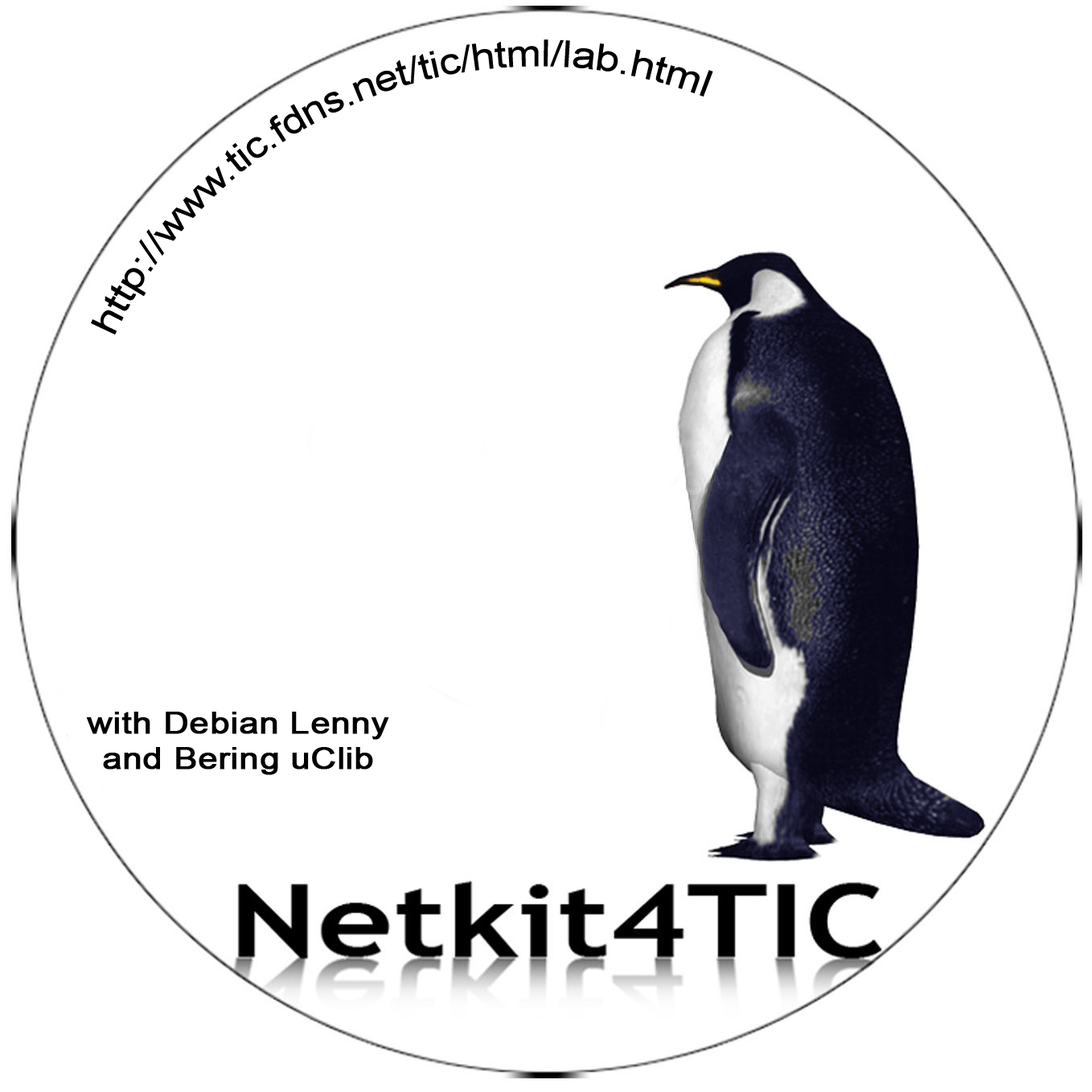
<style>
.page{position:relative;width:1092px;height:1092px;background:#ffffff}
.page>*{position:absolute;margin:0}
.t1{font:36.7px "ArialMT";color:#000000}
.t2{font:29.9px "ArialMT";color:#000000;font-weight:bold;scale:1.16 1}
</style>
<div class="page">
<p class="t1" style="left:91px;top:39px;width:622px;height:296px;rotate:-22deg">http://www.tic.fdns.net/tic/html/lab.html</p>
<p class="t2" style="left:86px;top:712px;width:303px;height:63px;text-align:center">with Debian Lenny<br>and Bering uClib</p>
</div>
